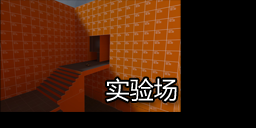
<style>
.page{position:relative;width:256px;height:128px;background:#000000}
.page>*{position:absolute;margin:0}
.t1{font:24px "MicrosoftYaHei";color:#ffffff}
</style>
<div class="page">
<p class="t1" style="left:106px;top:78px;width:71px;height:24px">实验场</p>
</div>
